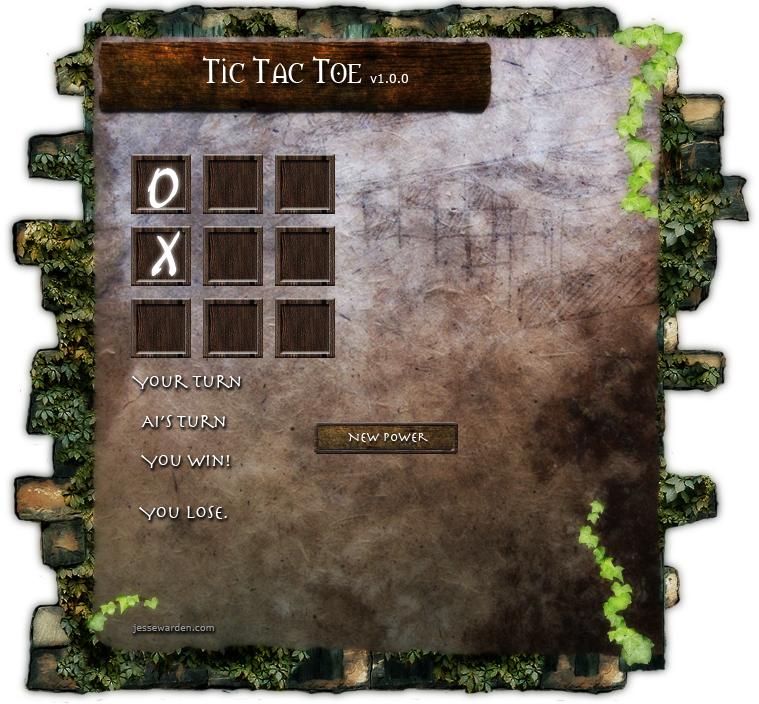
<style>
.page{position:relative;width:759px;height:704px}
.page>*{position:absolute;margin:0}
.t1{font:32px "Morpheus";color:#ffffff}
.t2{font:12px "Verdana";color:#ffffff}
.t3{font:18.7px "Herculanum";color:#ffffff}
.t4{font:13.3px "Herculanum";color:#ffffff}
.t5{font:9.3px "Verdana";color:#999999}
</style>
<div class="page">
<p class="t1" style="left:202px;top:56px;width:160px;height:27px">Tic Tac Toe</p>
<p class="t2" style="left:370px;top:74px;width:38px;height:9px">v1.0.0</p>
<p class="t3" style="left:132px;top:375px;width:109px;height:14px">Your Turn</p>
<p class="t3" style="left:141px;top:415px;width:84px;height:13px">AI’s Turn</p>
<p class="t4" style="left:348px;top:433px;width:80px;height:9px">New Power</p>
<p class="t3" style="left:141px;top:455px;width:89px;height:13px">You win!</p>
<p class="t3" style="left:139px;top:506px;width:88px;height:14px">You Lose.</p>
<p class="t5" style="left:132px;top:623px;width:82px;height:10px">jessewarden.com</p>
</div>
